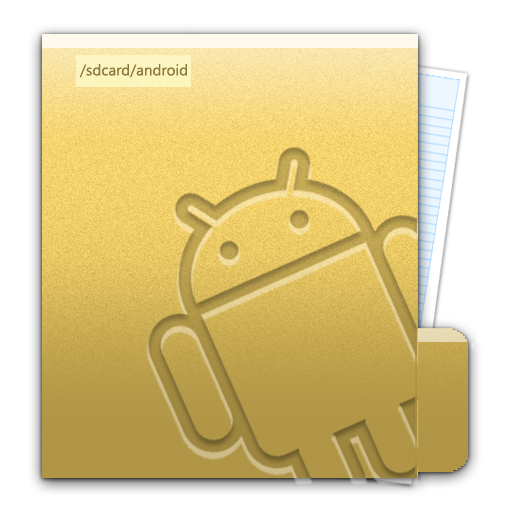
<style>
.page{position:relative;width:512px;height:512px;background:#ffffff}
.page>*{position:absolute;margin:0}
.t1{font:15.2px "SegoeUI";color:#8c783c}
</style>
<div class="page">
<p class="t1" style="left:79px;top:64px;width:108px;height:14px">/sdcard/android</p>
</div>
